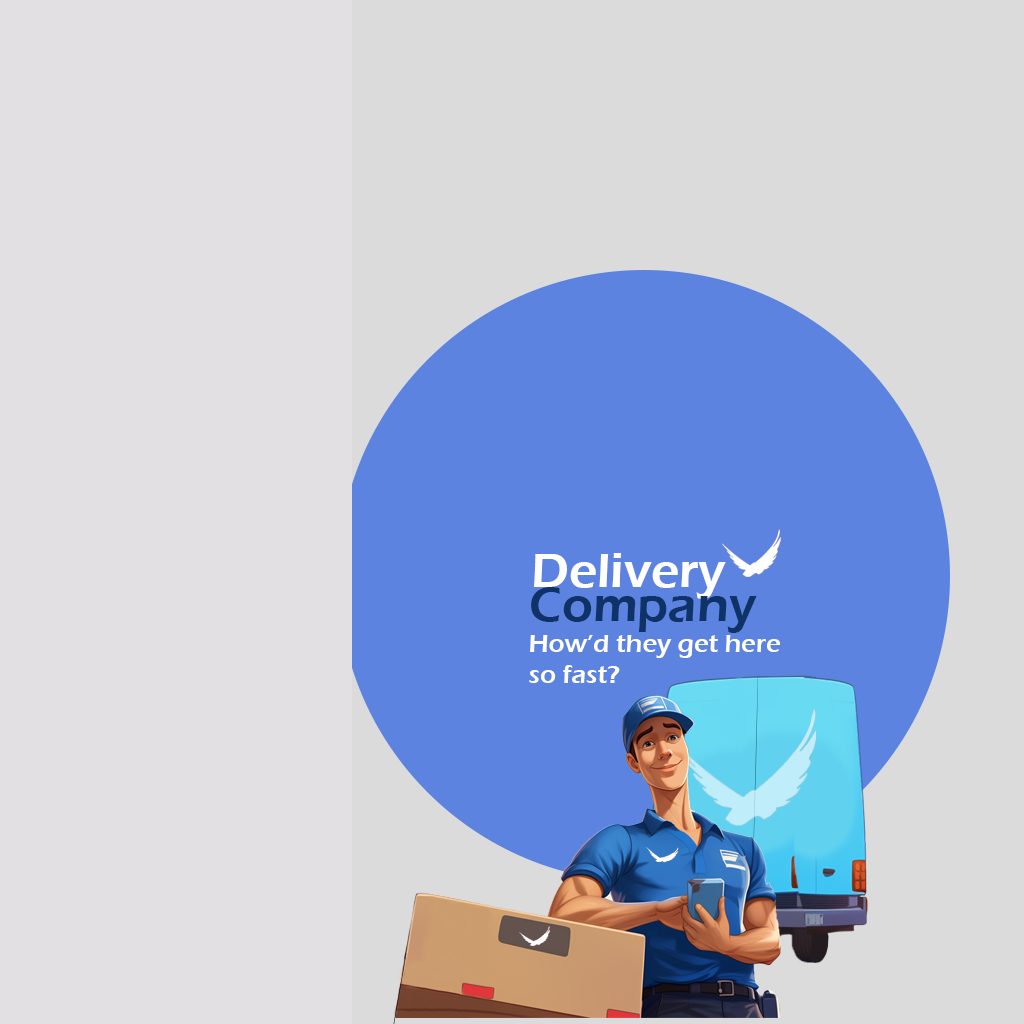
<style>
.page{position:relative;width:1024px;height:1024px;background:#e2e0e2}
.page>*{position:absolute;margin:0}
.t1{font:50px "ErasITC-Demi";color:#ffffff}
.t2{font:50px "ErasITC-Demi";color:#0f3269}
.t3{font:26px "ErasITC-Demi";color:#ffffff}
</style>
<div class="page">
<p class="t1" style="left:533px;top:553px;width:193px;height:46px">Delivery</p>
<p class="t2" style="left:531px;top:587px;width:226px;height:46px">Company</p>
<p class="t3" style="left:529px;top:635px;width:251px;height:48px">How’d they get here<br>so fast?</p>
</div>
